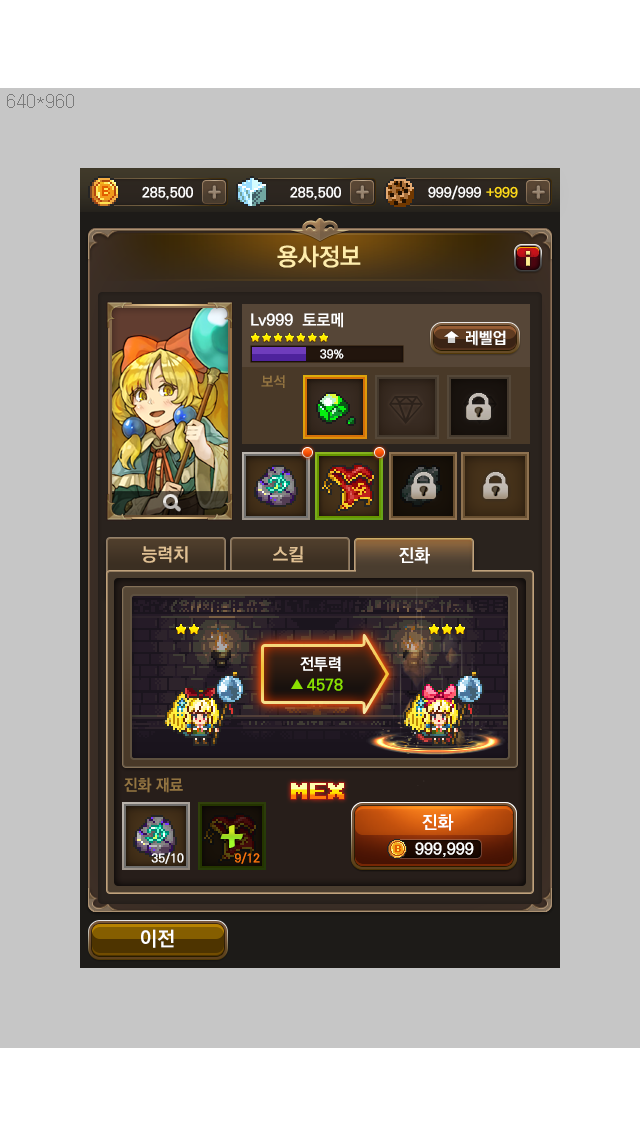
<style>
.page{position:relative;width:640px;height:1136px;background:#c6c6c6}
.page>*{position:absolute;margin:0}
.t1{font:24px "KoPubDotumBold";color:#ffedab}
.t2{font:18px "KoPubDotumBold";color:#e0c093}
.t3{font:18px "KoPubDotumBold";color:#ffffff}
.t4{font:16px "KoPubDotumBold";color:#ffffff}
.t5{font:16px "KoPubDotumBold";color:#8ae001}
.t6{font:16px "KoPubDotumBold";color:#937441}
.t7{font:18px "PressStart2P";letter-spacing:0.05em}
.t8{font:17.9px "KoPubDotumBold";color:#ffffff}
.t9{font:48px "CooperBlack";scale:0.96 1}
.t10{font:15.9px "KoPubDotumBold";color:#ffffff}
.t11{font:12px "KoPubDotumBold";color:#ffffff}
.t12{font:12px "KoPubDotumBold";color:#fe770d}
.t13{font:20px "KoPubDotumBold";color:#ffffff}
</style>
<div class="page">
<p class="t1" style="left:277px;top:245px;width:84px;height:23px">용사정보</p>
<p class="t2" style="left:142px;top:546px;width:46px;height:17px">능력치</p>
<p class="t2" style="left:273px;top:546px;width:30px;height:17px">스킬</p>
<p class="t3" style="left:399px;top:547px;width:31px;height:17px">진화</p>
<p class="t4" style="left:300px;top:656px;width:41px;height:16px">전투력</p>
<p class="t5" style="left:307px;top:678px;width:36px;height:13px">4578</p>
<p class="t6" style="left:124px;top:777px;width:59px;height:16px">진화 재료</p>
<p class="t7" style="left:291px;top:783px;width:53px;height:16px">MEX</p>
<p class="t8" style="left:422px;top:814px;width:32px;height:17px">진화</p>
<p class="t9" style="left:220px;top:825px;width:23px;height:23px">+</p>
<p class="t10" style="left:415px;top:842px;width:59px;height:15px">999,999</p>
<p class="t11" style="left:151px;top:852px;width:33px;height:12px">35/10</p>
<p class="t12" style="left:235px;top:852px;width:25px;height:12px">9/12</p>
<p class="t13" style="left:141px;top:929px;width:33px;height:19px">이전</p>
</div>
